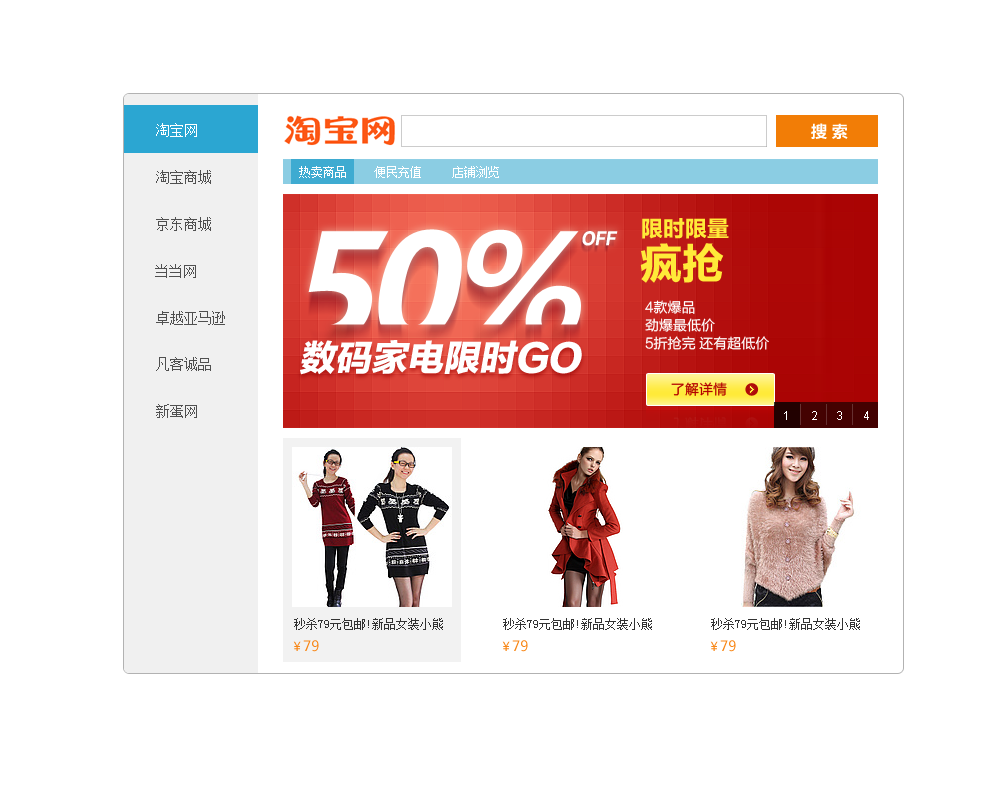
<style>
.page{position:relative;width:1000px;height:800px;background:#ffffff}
.page>*{position:absolute;margin:0}
.t1{font:14px "SimSun";color:#ffffff}
.t2{font:16px "MicrosoftYaHei-Bold";color:#ffffff}
.t3{font:14px "SimSun";color:#505050}
.t4{font:12px "SimSun";color:#fefefe}
.t5{font:12px "SimSun";color:#ffffff}
.t6{font:12px "ArialMT";color:#ffffff}
.t7{font:12px "SimSun";color:#333333}
.t8{font:14px "MicrosoftYaHei";color:#f88717}
.t9{font:12px "MicrosoftYaHei";color:#f88717}
</style>
<div class="page">
<p class="t1" style="left:156px;top:123px;width:41px;height:14px">淘宝网</p>
<p class="t2" style="left:811px;top:123px;width:37px;height:16px">搜 索</p>
<p class="t3" style="left:156px;top:170px;width:55px;height:14px">淘宝商城</p>
<p class="t4" style="left:299px;top:166px;width:47px;height:12px">热卖商品</p>
<p class="t5" style="left:374px;top:166px;width:47px;height:12px">便民充值</p>
<p class="t5" style="left:452px;top:166px;width:47px;height:12px">店铺浏览</p>
<p class="t3" style="left:156px;top:217px;width:55px;height:14px">京东商城</p>
<p class="t3" style="left:155px;top:264px;width:41px;height:14px">当当网</p>
<p class="t3" style="left:156px;top:311px;width:69px;height:14px">卓越亚马逊</p>
<p class="t3" style="left:156px;top:357px;width:55px;height:14px">凡客诚品</p>
<p class="t3" style="left:156px;top:404px;width:41px;height:14px">新蛋网</p>
<p class="t6" style="left:784px;top:411px;width:3px;height:9px">1</p>
<p class="t6" style="left:812px;top:411px;width:5px;height:9px">2</p>
<p class="t6" style="left:837px;top:411px;width:5px;height:9px">3</p>
<p class="t6" style="left:864px;top:411px;width:5px;height:9px">4</p>
<p class="t7" style="left:294px;top:618px;width:149px;height:12px">秒杀79元包邮!新品女装小熊</p>
<p class="t7" style="left:503px;top:618px;width:149px;height:12px">秒杀79元包邮!新品女装小熊</p>
<p class="t7" style="left:711px;top:618px;width:149px;height:12px">秒杀79元包邮!新品女装小熊</p>
<p class="t8" style="left:293px;top:640px;width:26px;height:12px"><span class="t9">￥</span>79</p>
<p class="t8" style="left:502px;top:640px;width:26px;height:12px"><span class="t9">￥</span>79</p>
<p class="t8" style="left:710px;top:640px;width:26px;height:12px"><span class="t9">￥</span>79</p>
</div>
